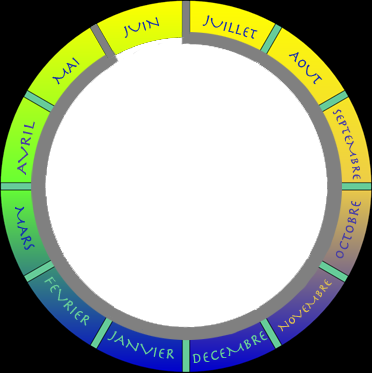
<style>
.page{position:relative;width:372px;height:373px;background:#ffffff}
.page>*{position:absolute;margin:0}
.t1{font:15px "Herculanum";color:#0f25b6}
.t2{font:12px "Herculanum";color:#4a40a3}
.t3{font:15px "Herculanum";color:#4a40a3}
.t4{font:15px "Herculanum";color:#1330af}
.t5{font:15px "Herculanum";color:#66cc99}
.t6{font:12px "Herculanum";color:#d7b954}
</style>
<div class="page">
<p class="t1" style="left:124px;top:17px;width:36px;height:21px;rotate:-17deg">JUIN</p>
<p class="t1" style="left:202px;top:15px;width:56px;height:24px;rotate:16deg">JUILLET</p>
<p class="t1" style="left:288px;top:52px;width:35px;height:33px;rotate:47deg">AOUT</p>
<p class="t1" style="left:52px;top:57px;width:28px;height:28px;rotate:-45deg">MAI</p>
<p class="t2" style="left:332px;top:109px;width:29px;height:71px;rotate:81deg">SEPTEMBRE</p>
<p class="t3" style="left:17px;top:121px;width:18px;height:54px;rotate:-68deg">AVRIL</p>
<p class="t4" style="left:15px;top:206px;width:20px;height:44px;rotate:65deg">MARS</p>
<p class="t3" style="left:335px;top:201px;width:26px;height:58px;rotate:-79deg">OCTOBRE</p>
<p class="t5" style="left:44px;top:276px;width:46px;height:50px;rotate:42deg">FEVRIER</p>
<p class="t6" style="left:277px;top:279px;width:55px;height:53px;rotate:-51deg">NOVEMBRE</p>
<p class="t5" style="left:107px;top:331px;width:67px;height:28px;rotate:16deg">JANVIER</p>
<p class="t5" style="left:192px;top:331px;width:76px;height:32px;rotate:-22deg">DECEMBRE</p>
</div>
